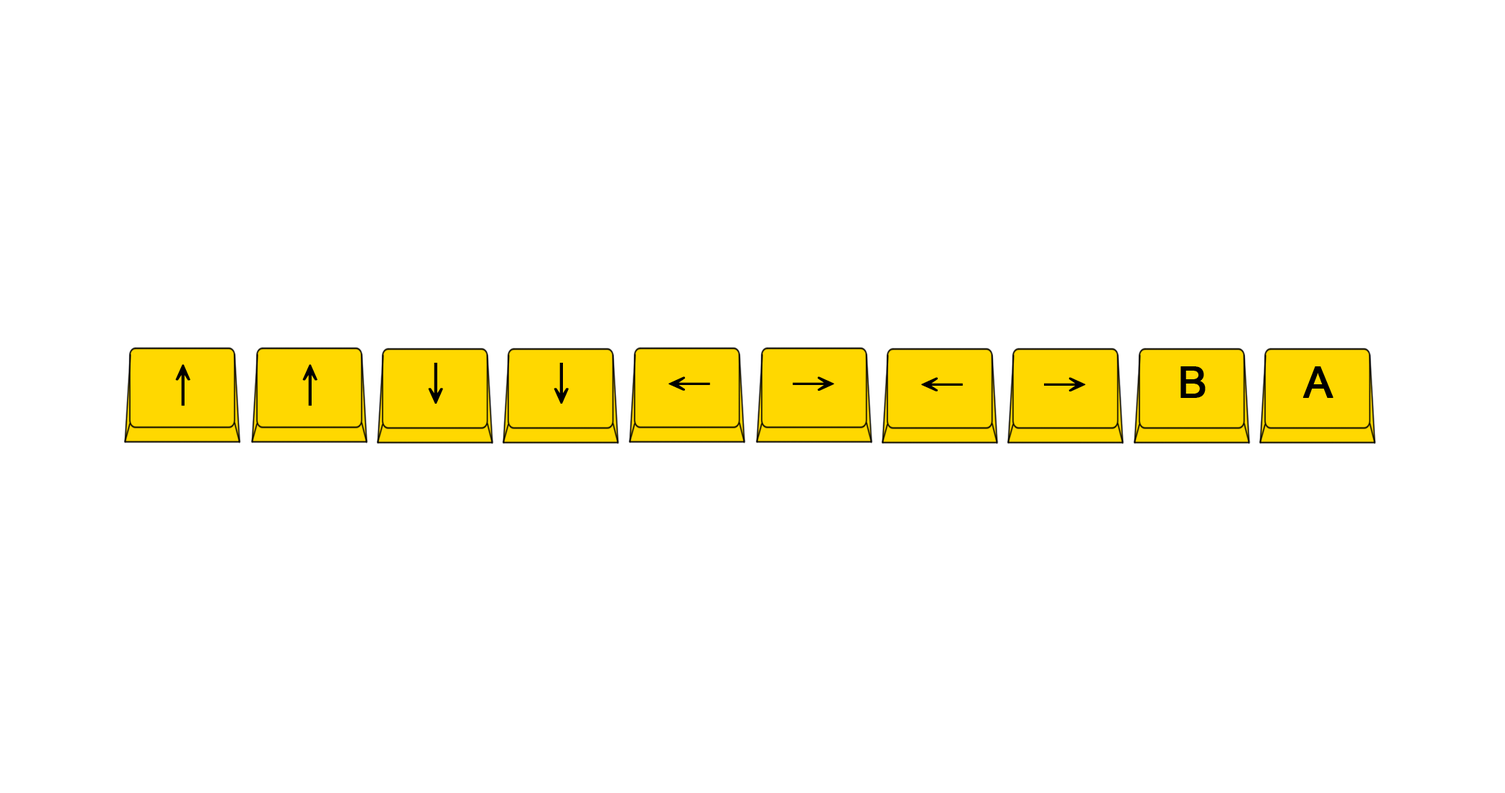
<style>
.page{position:relative;width:1505px;height:793px;background:#ffffff}
.page>*{position:absolute;margin:0}
.t1{font:43.1px "DFKaiShu-SB-Estd-BF";color:#000000;font-weight:bold}
.t2{font:43.1px "ArialMT";color:#000000;font-weight:bold}
</style>
<div class="page">
<p class="t1" style="left:175px;top:364px;width:15px;height:42px">↑</p>
<p class="t1" style="left:302px;top:364px;width:15px;height:42px">↑</p>
<p class="t1" style="left:428px;top:363px;width:15px;height:40px">↓</p>
<p class="t1" style="left:553px;top:363px;width:16px;height:40px">↓</p>
<p class="t1" style="left:668px;top:376px;width:42px;height:15px">←</p>
<p class="t1" style="left:793px;top:376px;width:41px;height:15px">→</p>
<p class="t1" style="left:921px;top:377px;width:42px;height:14px">←</p>
<p class="t1" style="left:1044px;top:377px;width:41px;height:14px">→</p>
<p class="t2" style="left:1180px;top:366px;width:25px;height:32px">B</p>
<p class="t2" style="left:1302px;top:366px;width:31px;height:32px">A</p>
</div>
